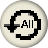
<style>
.page{position:relative;width:48px;height:48px;background:#ece9d8}
.page>*{position:absolute;margin:0}
.t1{font:11px "DejaVuSans";color:#000000}
</style>
<div class="page">
<p class="t1" style="left:21px;top:19px;width:13px;height:9px">All</p>
</div>
